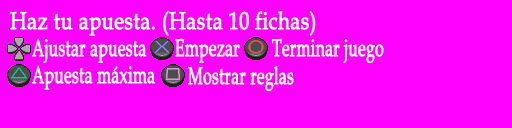
<style>
.page{position:relative;width:512px;height:128px;background:#ff00ff}
.page>*{position:absolute;margin:0}
.t1{font:24.2px "BookAntiqua";color:#ffffff;font-weight:bold;scale:0.82 1}
.t2{font:24.2px "BookAntiqua";color:#ffffff;font-weight:bold;scale:0.64 1}
</style>
<div class="page">
<p class="t1" style="left:10px;top:11px;width:306px;height:25px">Haz tu apuesta. (Hasta 10 fichas)</p>
<p class="t2" style="left:32px;top:38px;width:115px;height:26px">Ajustar apuesta</p>
<p class="t2" style="left:175px;top:38px;width:65px;height:25px">Empezar</p>
<p class="t2" style="left:271px;top:38px;width:113px;height:26px">Terminar juego</p>
<p class="t2" style="left:32px;top:65px;width:123px;height:25px">Apuesta máxima</p>
<p class="t2" style="left:188px;top:66px;width:106px;height:26px">Mostrar reglas</p>
</div>
